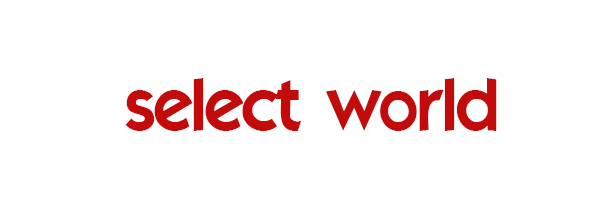
<style>
.page{position:relative;width:600px;height:200px;background:#ffffff}
.page>*{position:absolute;margin:0}
.t1{font:72px "ELEGANCE";color:#c30b0b}
</style>
<div class="page">
<p class="t1" style="left:125px;top:78px;width:372px;height:53px">select world</p>
</div>
